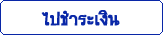
<style>
.page{position:relative;width:163px;height:35px;background:#ffffff}
.page>*{position:absolute;margin:0}
.t1{font:26px "2005_iannnnnGMO";letter-spacing:-0.04em;color:#0927a7;font-weight:bold}
</style>
<div class="page">
<p class="t1" style="left:41px;top:10px;width:79px;height:16px">ä»ªÓÃÐà§Ô¹</p>
</div>
